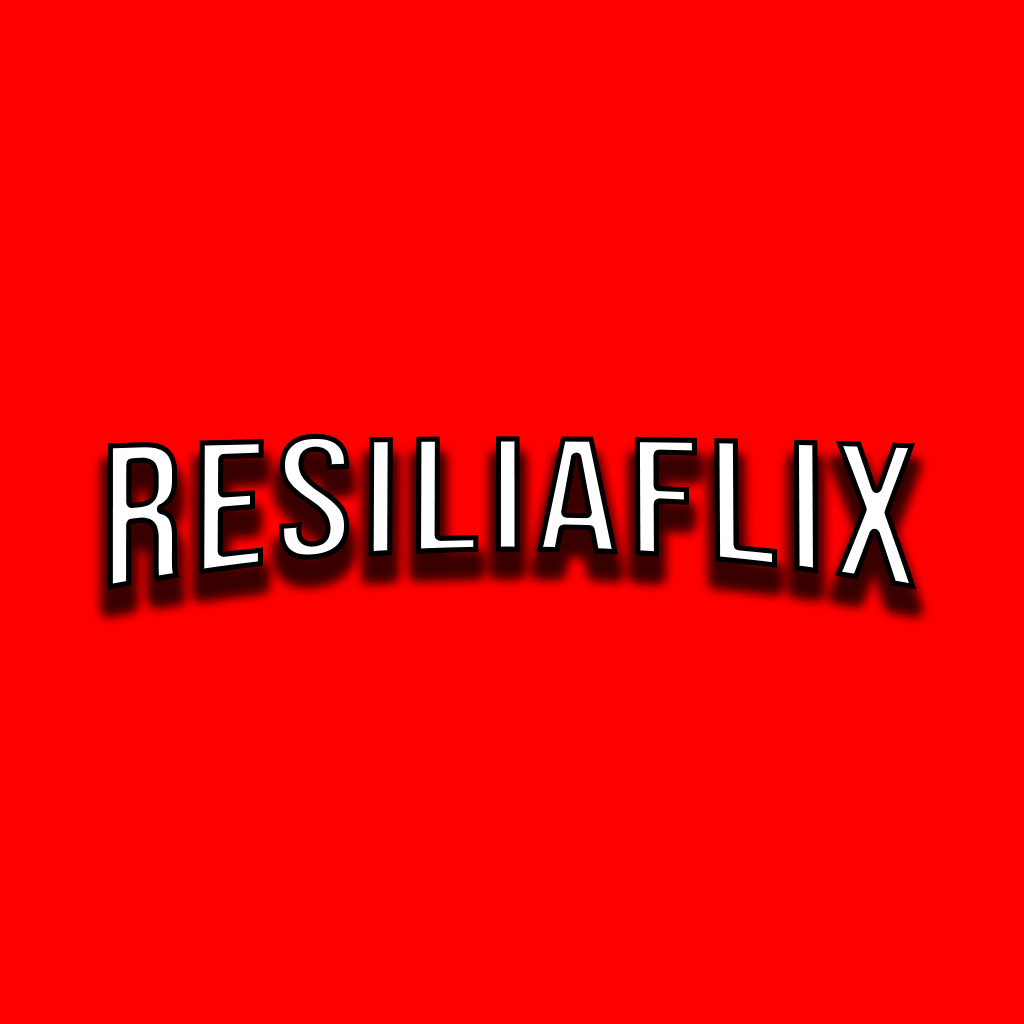
<style>
.page{position:relative;width:1024px;height:1024px;background:#ff0000}
.page>*{position:absolute;margin:0}
.t1{font:212.5px "BebasNeue-Regular";letter-spacing:0.03em}
</style>
<div class="page">
<p class="t1" style="left:107px;top:433px;width:810px;height:157px">RESILIAFLIX</p>
<p class="t1" style="left:107px;top:433px;width:810px;height:157px">RESILIAFLIX</p>
</div>
